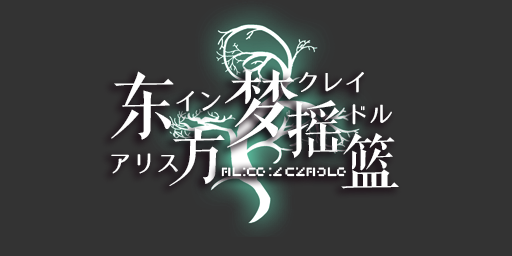
<style>
.page{position:relative;width:512px;height:256px;background:#333333}
.page>*{position:absolute;margin:0}
.t1{font:72px "FZQKBYSJW--GB1-0";color:#ffffff}
.t2{font:80px "FZQKBYSJW--GB1-0";color:#ffffff}
.t3{font:24px "07LogoTypeGothic7";color:#ffffff}
.t4{font:60px "FZQKBYSJW--GB1-0";color:#ffffff}
.t5{font:12px "Undefined";color:#ffffff}
</style>
<div class="page">
<p class="t1" style="left:111px;top:71px;width:63px;height:69px">东</p>
<p class="t2" style="left:225px;top:69px;width:73px;height:79px">梦</p>
<p class="t3" style="left:299px;top:72px;width:65px;height:21px">クレイ</p>
<p class="t3" style="left:176px;top:91px;width:45px;height:21px">イン</p>
<p class="t4" style="left:287px;top:100px;width:55px;height:58px">摇</p>
<p class="t3" style="left:352px;top:104px;width:40px;height:21px">ドル</p>
<p class="t4" style="left:169px;top:128px;width:56px;height:58px">方</p>
<p class="t4" style="left:341px;top:133px;width:58px;height:56px">篮</p>
<p class="t3" style="left:111px;top:153px;width:67px;height:21px">アリス</p>
<p class="t5" style="left:221px;top:167px;width:125px;height:10px">Alice in Cradle</p>
</div>
